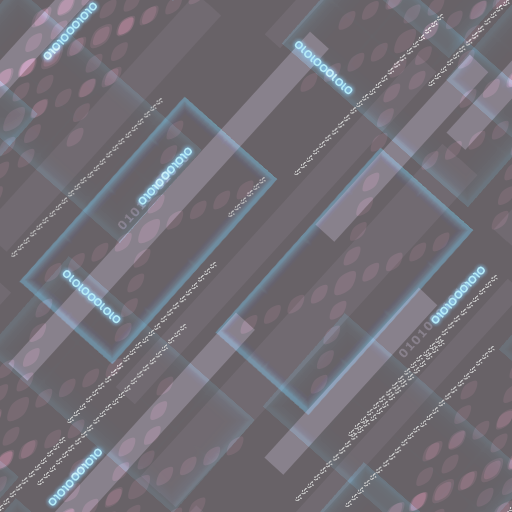
<style>
.page{position:relative;width:512px;height:512px;background:#686267}
.page>*{position:absolute;margin:0}
.t1{font:12px "Nasalization";letter-spacing:0.05em;color:#b8edf7}
</style>
<div class="page">
<p class="t1" style="left:43px;top:2px;width:54px;height:58px;rotate:-48deg">01010001010</p>
<p class="t1" style="left:294px;top:41px;width:59px;height:54px;rotate:-138deg">01010001010</p>
<p class="t1" style="left:138px;top:147px;width:54px;height:58px;rotate:-48deg">01010001010</p>
<p class="t1" style="left:62px;top:270px;width:59px;height:54px;rotate:-138deg">01010001010</p>
<p class="t1" style="left:431px;top:266px;width:54px;height:58px;rotate:-48deg">01010001010</p>
<p class="t1" style="left:48px;top:448px;width:54px;height:58px;rotate:-48deg">01010001010</p>
</div>
